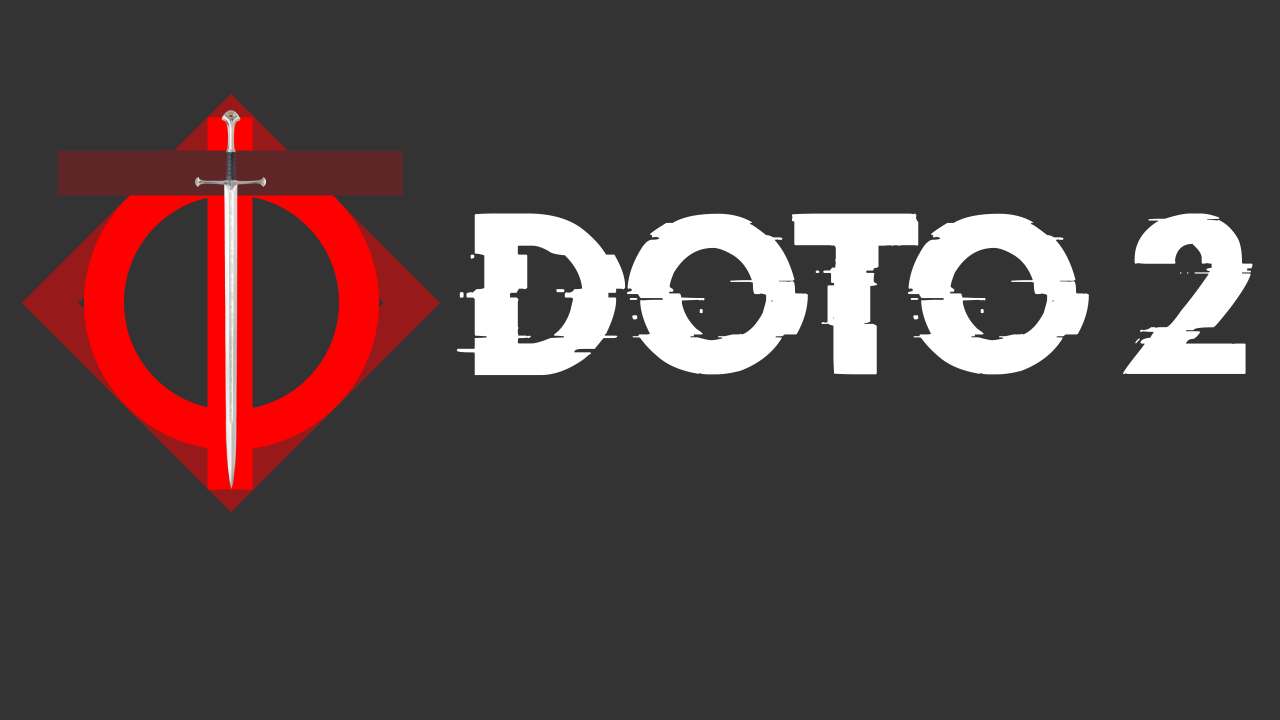
<style>
.page{position:relative;width:1280px;height:720px;background:#333333}
.page>*{position:absolute;margin:0}
.t1{font:180px "DoctorGlitch";color:#ffffff}
</style>
<div class="page">
<p class="t1" style="left:456px;top:213px;width:797px;height:163px">DOTO 2</p>
</div>
